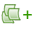
<style>
.page{position:relative;width:35px;height:30px;background:#ffffff}
.page>*{position:absolute;margin:0}
.t1{font:18px "ArialMT";color:#339900}
</style>
<div class="page">
<p class="t1" style="left:23px;top:10px;width:9px;height:9px">+</p>
</div>
